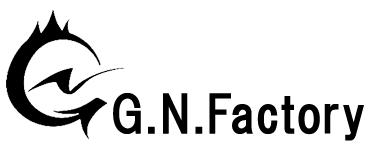
<style>
.page{position:relative;width:374px;height:152px;background:#ffffff}
.page>*{position:absolute;margin:0}
.t1{font:50px "HGPGothicE";letter-spacing:0.12em;color:#000000;font-weight:bold}
</style>
<div class="page">
<p class="t1" style="left:113px;top:93px;width:251px;height:48px">G.N.Factory</p>
</div>
